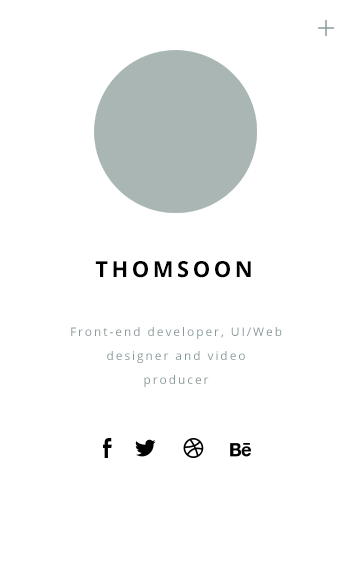
<style>
.page{position:relative;width:354px;height:566px;background:#ffffff}
.page>*{position:absolute;margin:0}
.t1{font:22px "OpenSans-Bold";letter-spacing:0.16em;color:#000000;text-transform:uppercase}
.t2{font:12px/24px "OpenSans";letter-spacing:0.16em;color:#879999}
</style>
<div class="page">
<p class="t1" style="left:95px;top:261px;width:156px;height:17px">THOMSOON</p>
<p class="t2" style="left:71px;top:327px;width:211px;height:60px;text-align:center">Front-end developer, UI/Web<br>designer and video<br>producer</p>
</div>
